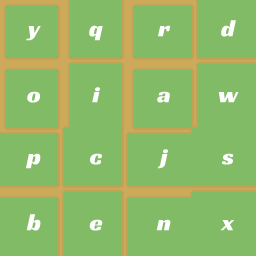
<style>
.page{position:relative;width:256px;height:256px;background:#82bb65}
.page>*{position:absolute;margin:0}
.t1{font:24px "RacingSansOne-Regular";color:#ffffff}
</style>
<div class="page">
<p class="t1" style="left:26px;top:26px;width:15px;height:15px">y</p>
<p class="t1" style="left:89px;top:25px;width:14px;height:16px">q</p>
<p class="t1" style="left:158px;top:25px;width:13px;height:12px">r</p>
<p class="t1" style="left:221px;top:20px;width:15px;height:17px">d</p>
<p class="t1" style="left:92px;top:87px;width:8px;height:16px">i</p>
<p class="t1" style="left:27px;top:91px;width:13px;height:12px">o</p>
<p class="t1" style="left:157px;top:91px;width:13px;height:12px">a</p>
<p class="t1" style="left:218px;top:92px;width:21px;height:11px">w</p>
<p class="t1" style="left:158px;top:149px;width:10px;height:20px">j</p>
<p class="t1" style="left:26px;top:153px;width:15px;height:16px">p</p>
<p class="t1" style="left:90px;top:153px;width:12px;height:12px">c</p>
<p class="t1" style="left:221px;top:153px;width:13px;height:12px">s</p>
<p class="t1" style="left:26px;top:214px;width:15px;height:17px">b</p>
<p class="t1" style="left:89px;top:219px;width:14px;height:12px">e</p>
<p class="t1" style="left:156px;top:219px;width:15px;height:12px">n</p>
<p class="t1" style="left:220px;top:220px;width:15px;height:11px">x</p>
</div>
